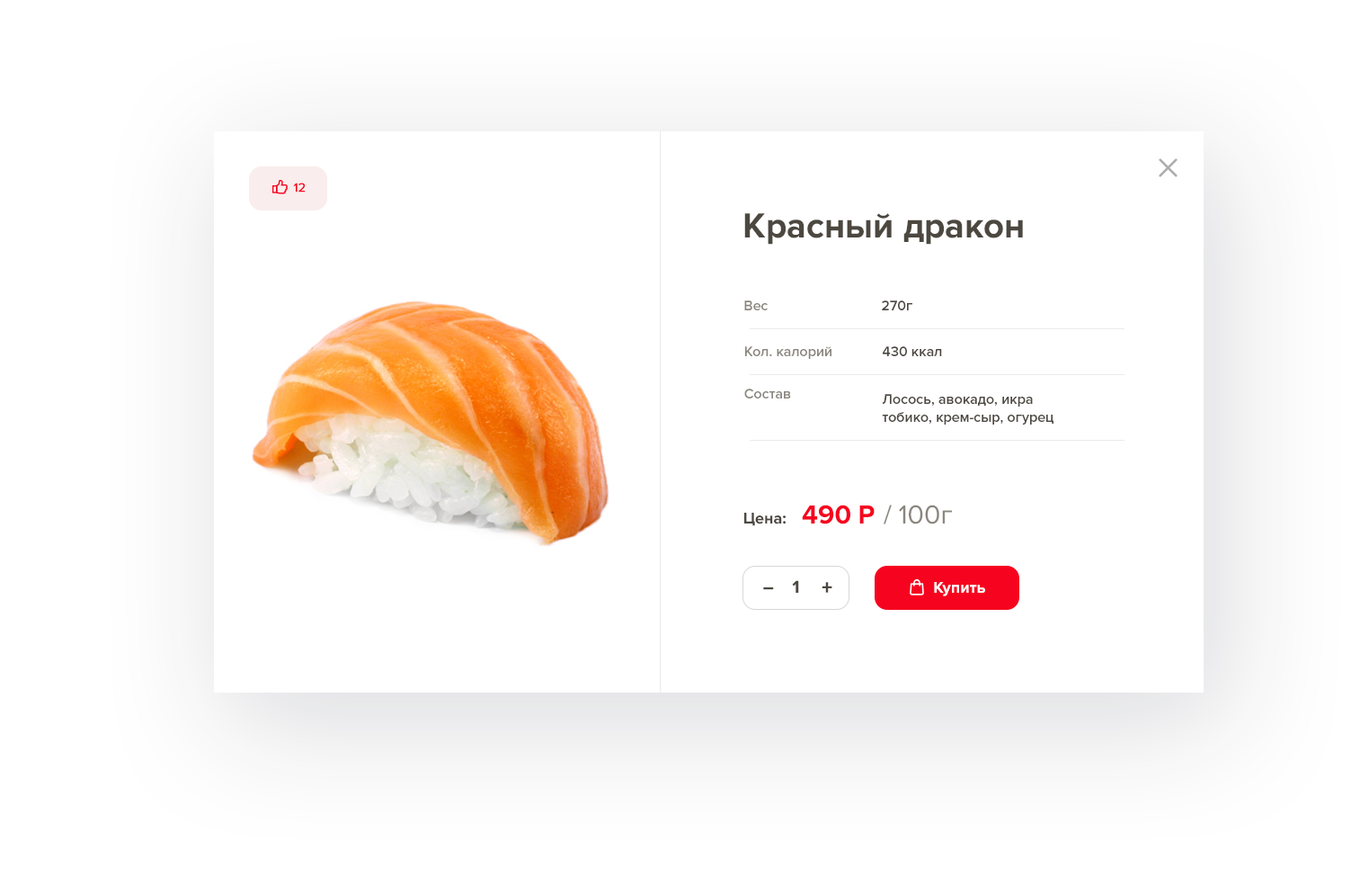
<style>
.page{position:relative;width:1360px;height:877px;background:#ffffff}
.page>*{position:absolute;margin:0}
.t1{font:12.6px "ProximaNova-Regular";color:#f6041f;font-weight:bold}
.t2{font:36px "ProximaNova-Bold";color:#4c4840}
.t3{font:14.4px "ProximaNova-Semibold";color:#8a867e}
.t4{font:14.4px "ProximaNova-Semibold";color:#4c4840}
.t5{font:14.4px/18px "ProximaNova-Semibold";color:#4c4840}
.t6{font:27px "ProximaNova-Bold";color:#f6041f}
.t7{font:27px "ProximaNova-Regular";color:#8a867e}
.t8{font:27px "ProximaNova-Bold";color:#4c4840}
.t9{font:16.2px "ProximaNova-Bold";color:#4c4840}
.t10{font:18px "ProximaNova-Bold";color:#4c4840}
.t11{font:21.6px "ProximaNova-Extrabld";color:#4c4840}
.t12{font:16.2px "ProximaNova-Bold";color:#ffffff}
.t13{font:21.6px "ProximaNova-Extrabld";color:#4c4840;scale:0.8 1}
</style>
<div class="page">
<p class="t1" style="left:293px;top:183px;width:13px;height:9px">12</p>
<p class="t2" style="left:744px;top:213px;width:279px;height:32px">Красный дракон</p>
<p class="t3" style="left:744px;top:300px;width:24px;height:10px">Вес</p>
<p class="t4" style="left:882px;top:300px;width:31px;height:10px">270г</p>
<p class="t3" style="left:745px;top:346px;width:87px;height:13px">Кол. калорий</p>
<p class="t4" style="left:883px;top:346px;width:59px;height:10px">430 ккал</p>
<p class="t3" style="left:744px;top:388px;width:47px;height:10px">Состав</p>
<p class="t5" style="left:882px;top:394px;width:172px;height:30px">Лосось, авокадо, икра тобико, крем-сыр, огурец</p>
<p class="t6" style="left:802px;top:504px;width:73px;height:20px">490 P</p>
<p class="t7" style="left:884px;top:504px;width:68px;height:20px"><span class="t8"> </span>/ 100г</p>
<p class="t9" style="left:744px;top:512px;width:42px;height:14px">Цена:</p>
<p class="t10" style="left:792px;top:580px;width:7px;height:12px">1</p>
<p class="t11" style="left:822px;top:582px;width:11px;height:10px">+</p>
<p class="t12" style="left:934px;top:582px;width:51px;height:14px">Купить</p>
<p class="t13" style="left:763px;top:587px;width:11px;height:3px">_</p>
</div>
